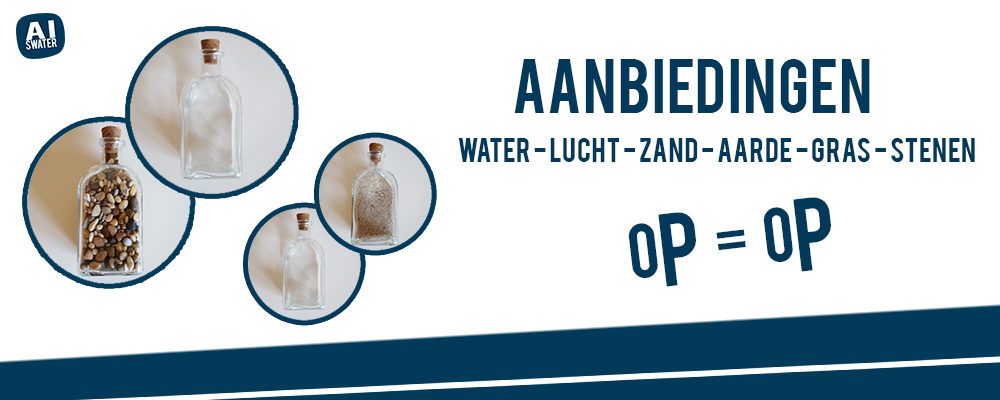
<style>
.page{position:relative;width:1000px;height:400px;background:#ffffff}
.page>*{position:absolute;margin:0}
.t1{font:60px "Bebas";color:#023859}
.t2{font:27.4px "Bebas";color:#023859}
.t3{font:81.6px "Bebas";color:#023859}
</style>
<div class="page">
<p class="t1" style="left:514px;top:59px;width:356px;height:54px">Aanbiedingen</p>
<p class="t2" style="left:458px;top:138px;width:517px;height:24px">water - lucht - zand - aarde - gras - stenen</p>
<p class="t3" style="left:793px;top:197px;width:38px;height:75px;rotate:-7deg">p</p>
<p class="t1" style="left:763px;top:207px;width:30px;height:55px;rotate:-7deg">o</p>
<p class="t3" style="left:658px;top:212px;width:38px;height:75px;rotate:-7deg">p</p>
<p class="t1" style="left:628px;top:223px;width:30px;height:55px;rotate:-7deg">o</p>
<p class="t1" style="left:716px;top:229px;width:30px;height:22px;rotate:-7deg">=</p>
</div>
